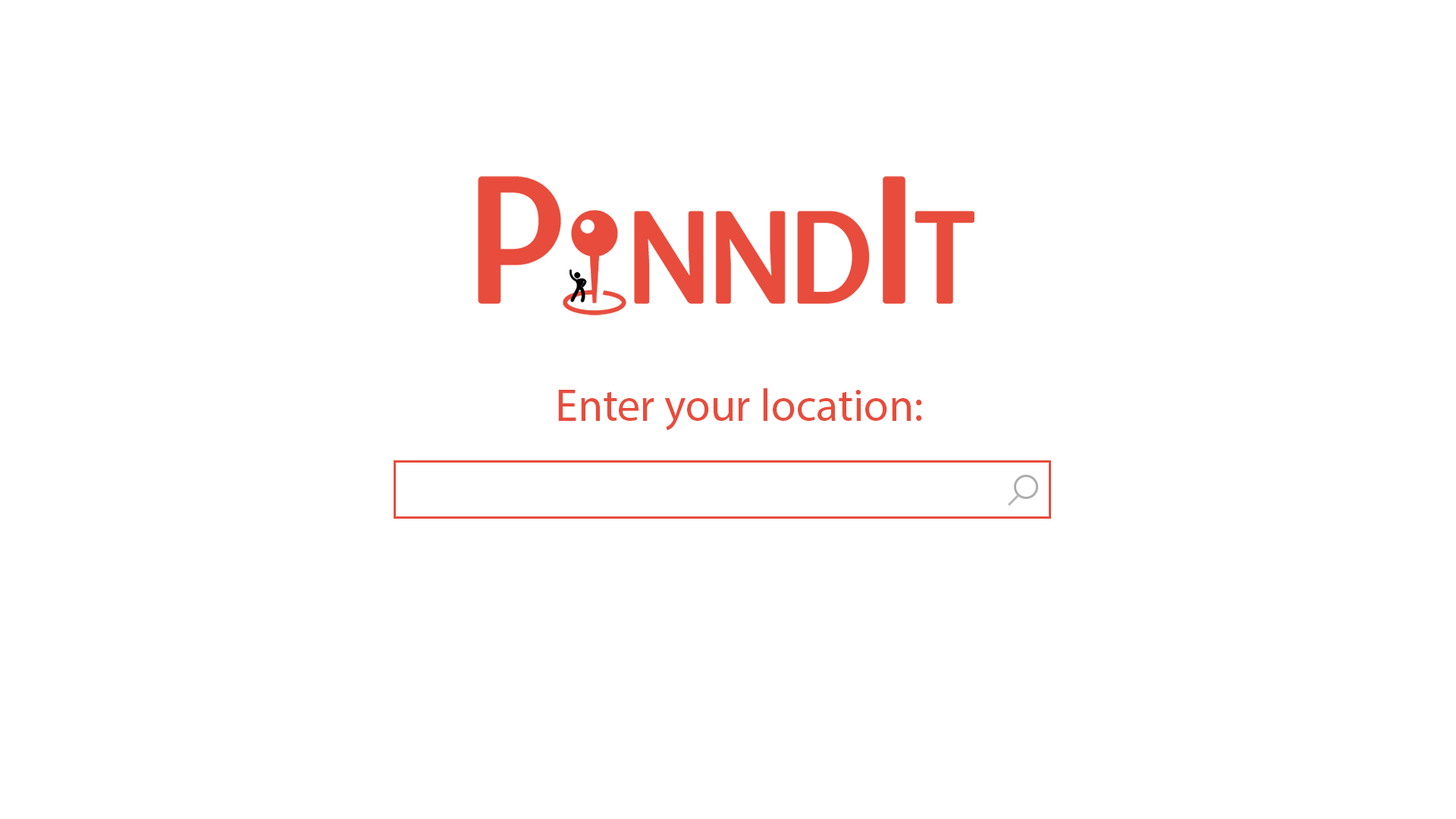
<style>
.page{position:relative;width:1456px;height:819px;background:#ffffff}
.page>*{position:absolute;margin:0}
.t1{font:45.5px "MyriadPro-Regular";color:#e74c3c}
</style>
<div class="page">
<p class="t1" style="left:558px;top:388px;width:364px;height:43px">Enter your location:</p>
</div>
